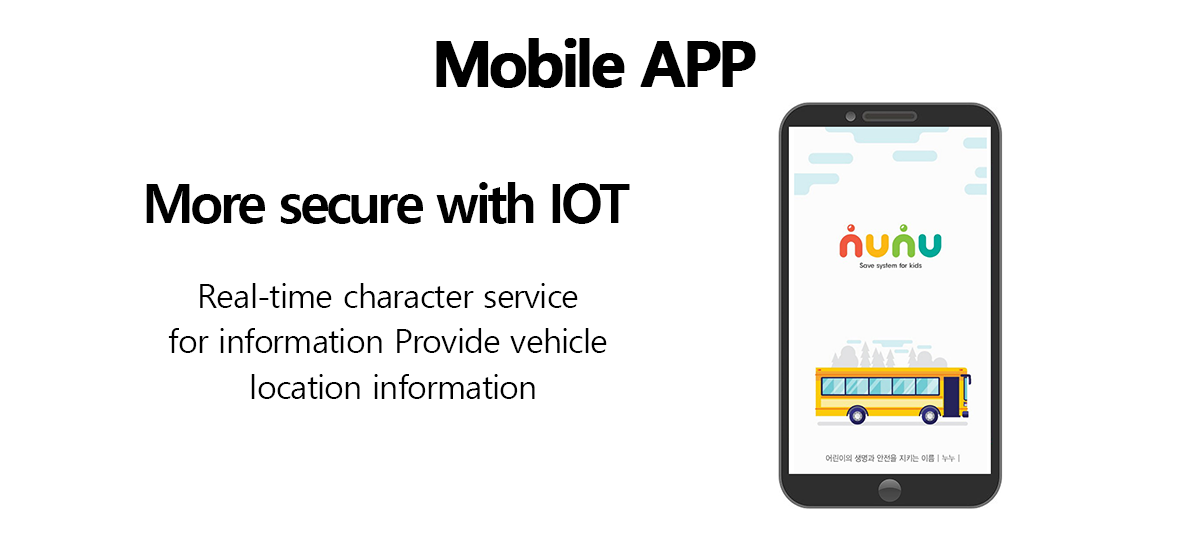
<style>
.page{position:relative;width:1190px;height:540px;background:#ffffff}
.page>*{position:absolute;margin:0}
.t1{font:62.5px "MalgunGothicBold";letter-spacing:-0.07em;color:#000000;font-weight:bold}
.t2{font:54.2px "MalgunGothicBold";letter-spacing:-0.07em;color:#000000}
.t3{font:33.3px/45.8px "MalgunGothic";letter-spacing:-0.03em;color:#000000}
</style>
<div class="page">
<p class="t1" style="left:436px;top:38px;width:320px;height:50px">Mobile APP</p>
<p class="t2" style="left:146px;top:182px;width:484px;height:42px">More secure with IOT</p>
<p class="t3" style="left:168px;top:283px;width:439px;height:116px;text-align:center">Real-time character service <br>for information Provide vehicle <br>location information</p>
</div>
